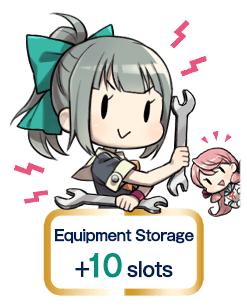
<style>
.page{position:relative;width:247px;height:307px;background:#ffffff}
.page>*{position:absolute;margin:0}
.t1{font:15px "GothicMB101Pro-Medium";letter-spacing:-0.04em;color:#001d59;font-weight:bold;scale:0.9 1}
.t2{font:20px "GothicMB101Pro-Medium";letter-spacing:-0.04em;color:#001d59;font-weight:bold;scale:0.9 1}
.t3{font:30px "GothicMB101Pro-Medium";letter-spacing:-0.04em;color:#00927d;font-weight:bold;scale:0.9 1}
</style>
<div class="page">
<p class="t1" style="left:55px;top:229px;width:139px;height:49px;text-align:center">Equipment Storage<br><span class="t2">+</span><span class="t3">10 </span><span class="t2">slots</span></p>
</div>
